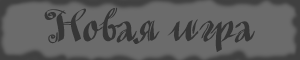
<style>
.page{position:relative;width:300px;height:60px;background:#6b6b6b}
.page>*{position:absolute;margin:0}
.t1{font:41.7px "MinusmanC";color:#363636}
</style>
<div class="page">
<p class="t1" style="left:44px;top:7px;width:211px;height:45px">Новая игра</p>
</div>
